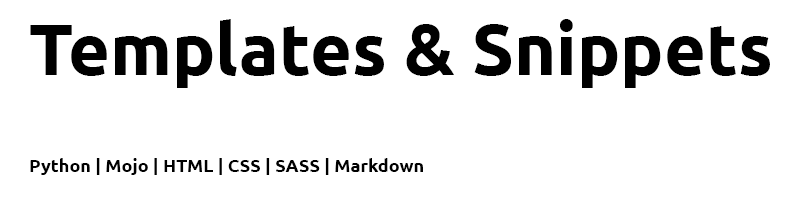
<style>
.page{position:relative;width:800px;height:200px;background:#ffffff}
.page>*{position:absolute;margin:0}
.t1{font:72px "UbuntuNerdFontComplete-Bold";color:#000000}
.t2{font:18px "UbuntuNerdFontComplete-Bold";color:#000000}
</style>
<div class="page">
<p class="t1" style="left:30px;top:19px;width:740px;height:69px">Templates &amp; Snippets</p>
<p class="t2" style="left:30px;top:158px;width:393px;height:17px">Python | Mojo | HTML | CSS | SASS | Markdown</p>
</div>
